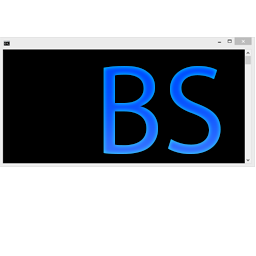
<style>
.page{position:relative;width:256px;height:256px;background:#ffffff}
.page>*{position:absolute;margin:0}
.t1{font:128px "MyriadHebrew-Regular"}
</style>
<div class="page">
<p class="t1" style="left:103px;top:66px;width:118px;height:88px">BS</p>
</div>
